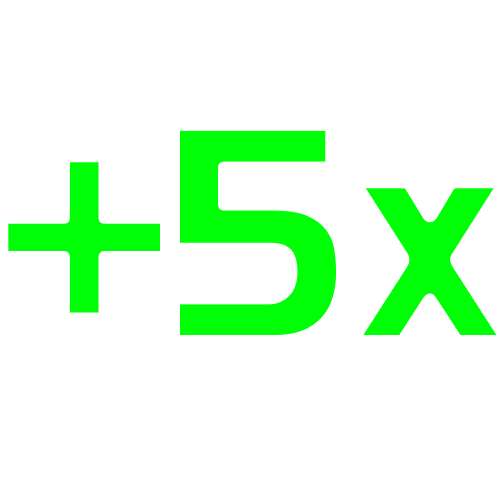
<style>
.page{position:relative;width:500px;height:500px;background:#ffffff}
.page>*{position:absolute;margin:0}
.t1{font:293.4px "Prototype";color:#00ff06}
</style>
<div class="page">
<p class="t1" style="left:5px;top:127px;width:497px;height:211px">+5x</p>
</div>
